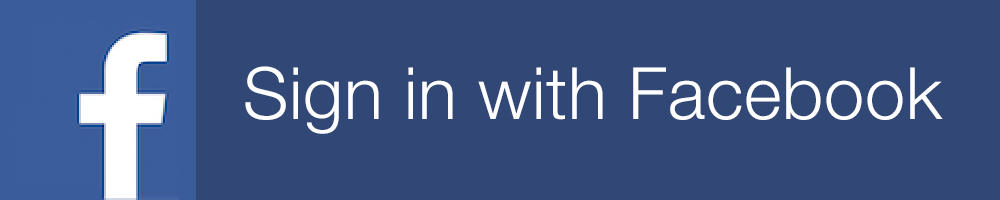
<style>
.page{position:relative;width:1000px;height:200px;background:#314877}
.page>*{position:absolute;margin:0}
.t1{font:72px "HelveticaNeue-Light";letter-spacing:0.01em;color:#ffffff}
</style>
<div class="page">
<p class="t1" style="left:245px;top:66px;width:698px;height:68px">Sign in with Facebook</p>
</div>
